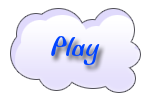
<style>
.page{position:relative;width:150px;height:100px;background:#ffffff}
.page>*{position:absolute;margin:0}
.t1{font:30px "BiffoMTStd";color:#0144ff}
</style>
<div class="page">
<p class="t1" style="left:51px;top:36px;width:49px;height:29px">Play</p>
</div>
